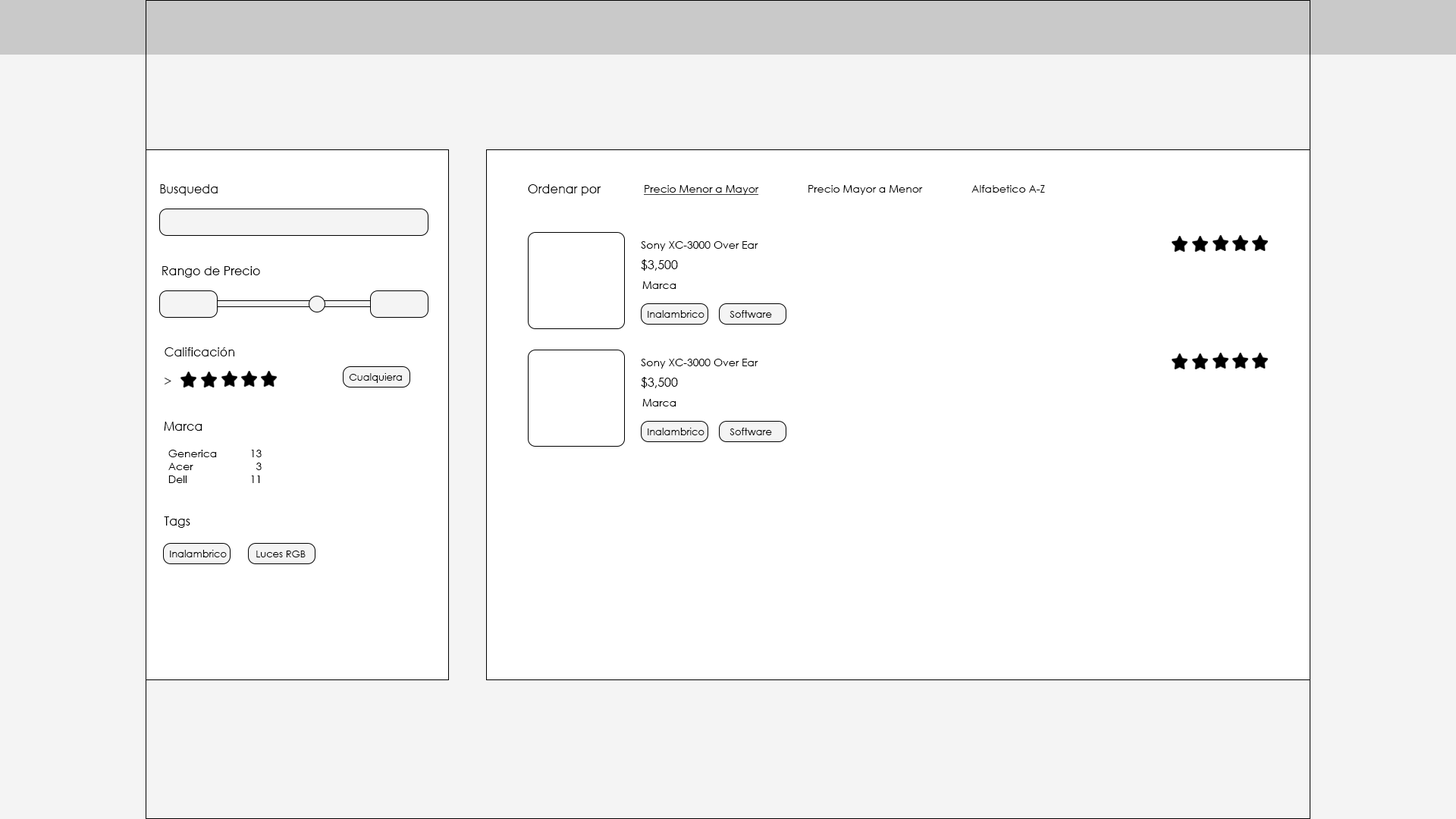
<style>
.page{position:relative;width:1456px;height:819px;background:#ffffff}
.page>*{position:absolute;margin:0}
.t1{font:12.1px "CenturyGothic";color:#000000}
.t2{font:10.6px "CenturyGothic";color:#000000}
.t3{font:10.6px "CenturyGothic";color:#000000;text-decoration:underline}
.t4{font:9.9px "CenturyGothic";color:#000000}
</style>
<div class="page">
<p class="t1" style="left:160px;top:184px;width:58px;height:12px">Busqueda</p>
<p class="t1" style="left:528px;top:184px;width:73px;height:12px">Ordenar por</p>
<p class="t2" style="left:644px;top:185px;width:401px;height:10px"><span class="t3">Precio Menor a Mayor</span>  Precio Mayor a Menor  Alfabetico A-Z</p>
<p class="t2" style="left:641px;top:241px;width:117px;height:10px">Sony XC-3000 Over Ear</p>
<p class="t1" style="left:162px;top:266px;width:98px;height:12px">Rango de Precio</p>
<p class="t1" style="left:641px;top:259px;width:37px;height:12px">$3,500</p>
<p class="t2" style="left:642px;top:281px;width:34px;height:8px">Marca</p>
<p class="t4" style="left:648px;top:310px;width:56px;height:8px">Inalambrico</p>
<p class="t4" style="left:730px;top:310px;width:42px;height:8px">Software</p>
<p class="t1" style="left:165px;top:347px;width:69px;height:37px">Calificación<br><br>&gt;</p>
<p class="t2" style="left:641px;top:359px;width:117px;height:10px">Sony XC-3000 Over Ear</p>
<p class="t4" style="left:349px;top:373px;width:53px;height:10px">Cualquiera</p>
<p class="t1" style="left:641px;top:377px;width:37px;height:11px">$3,500</p>
<p class="t2" style="left:642px;top:399px;width:34px;height:7px">Marca</p>
<p class="t1" style="left:164px;top:422px;width:38px;height:9px">Marca</p>
<p class="t4" style="left:648px;top:428px;width:56px;height:7px">Inalambrico</p>
<p class="t4" style="left:730px;top:428px;width:42px;height:7px">Software</p>
<p class="t2" style="left:168px;top:450px;width:94px;height:33px">Generica  13<br>Acer       3<br>Dell   11</p>
<p class="t1" style="left:164px;top:516px;width:26px;height:12px">Tags</p>
<p class="t4" style="left:170px;top:550px;width:57px;height:7px">Inalambrico</p>
<p class="t4" style="left:256px;top:551px;width:50px;height:6px">Luces RGB</p>
</div>
